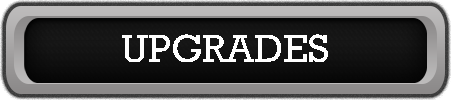
<style>
.page{position:relative;width:451px;height:100px}
.page>*{position:absolute;margin:0}
.t1{font:39.8px "Rockwell";color:#ffffff}
</style>
<div class="page">
<p class="t1" style="left:122px;top:34px;width:206px;height:28px">UPGRADES</p>
</div>
